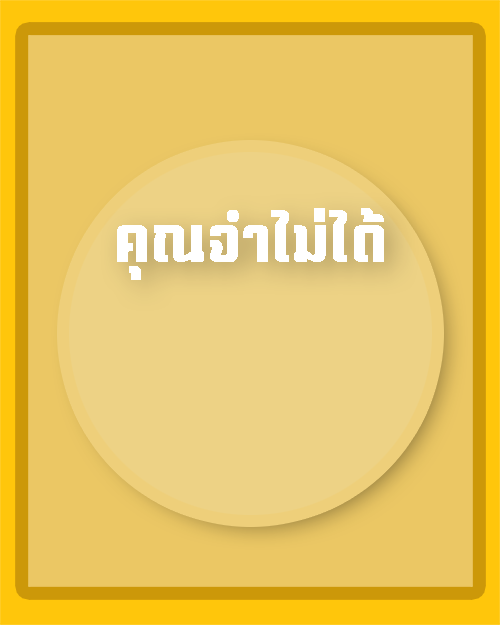
<style>
.page{position:relative;width:500px;height:625px;background:#ebc764}
.page>*{position:absolute;margin:0}
.t1{font:91.7px "chuanchiim-Regular";color:#ffffff}
</style>
<div class="page">
<p class="t1" style="left:117px;top:208px;width:267px;height:72px">คุณจำไม่ได้</p>
</div>
